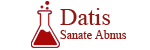
<style>
.page{position:relative;width:150px;height:50px;background:#ffffff}
.page>*{position:absolute;margin:0}
.t1{font:12px "TimesNewRomanPSMT";color:#911813}
.t2{font:24px "TimesNewRomanPSMT";color:#911813}
</style>
<div class="page">
<p class="t1" style="left:60px;top:8px;width:67px;height:31px"><span class="t2">Datis<br></span>Sanate Abnus</p>
</div>
